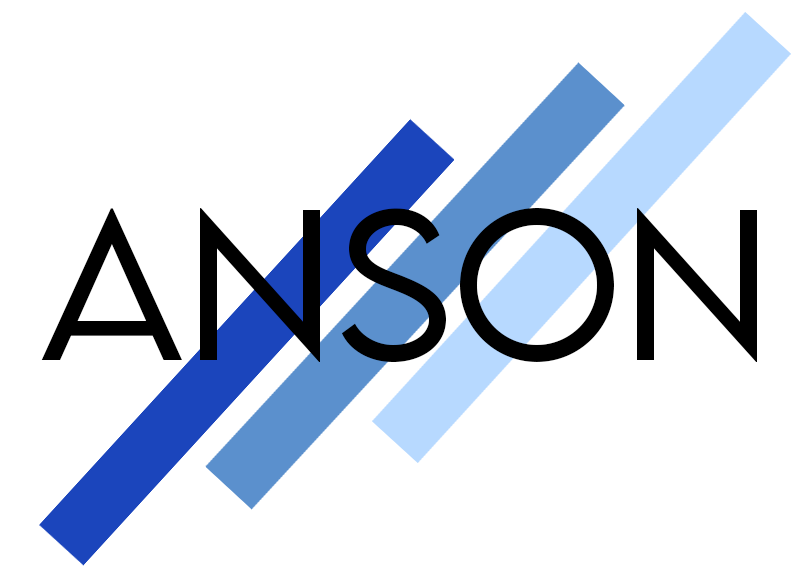
<style>
.page{position:relative;width:800px;height:570px;background:#ffffff}
.page>*{position:absolute;margin:0}
.t1{font:190px "LEMONMILK-Light";color:#000000}
</style>
<div class="page">
<p class="t1" style="left:41px;top:208px;width:716px;height:154px">anson</p>
</div>
